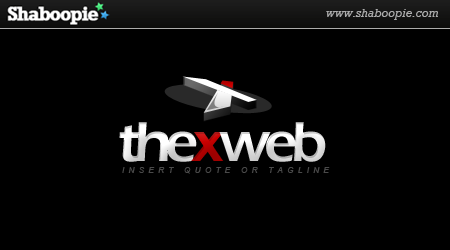
<style>
.page{position:relative;width:450px;height:250px;background:#000000}
.page>*{position:absolute;margin:0}
.t1{font:58.3px "ErasITC-Demi";letter-spacing:-0.1em}
.t2{font:8.3px "Arial-ItalicMT";letter-spacing:0.5em;color:#4a4a4a}
</style>
<div class="page">
<p class="t1" style="left:119px;top:122px;width:207px;height:40px">thexweb</p>
<p class="t2" style="left:122px;top:167px;width:208px;height:7px">INSERT QUOTE OR TAGLINE</p>
</div>
